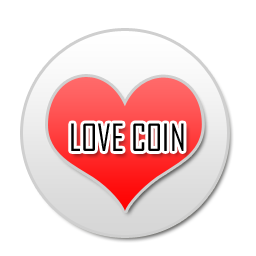
<style>
.page{position:relative;width:256px;height:256px;background:#ffffff}
.page>*{position:absolute;margin:0}
.t1{font:36px "AgencyFB-Reg";color:#000000}
</style>
<div class="page">
<p class="t1" style="left:71px;top:123px;width:113px;height:28px">LOVE COIN</p>
</div>
